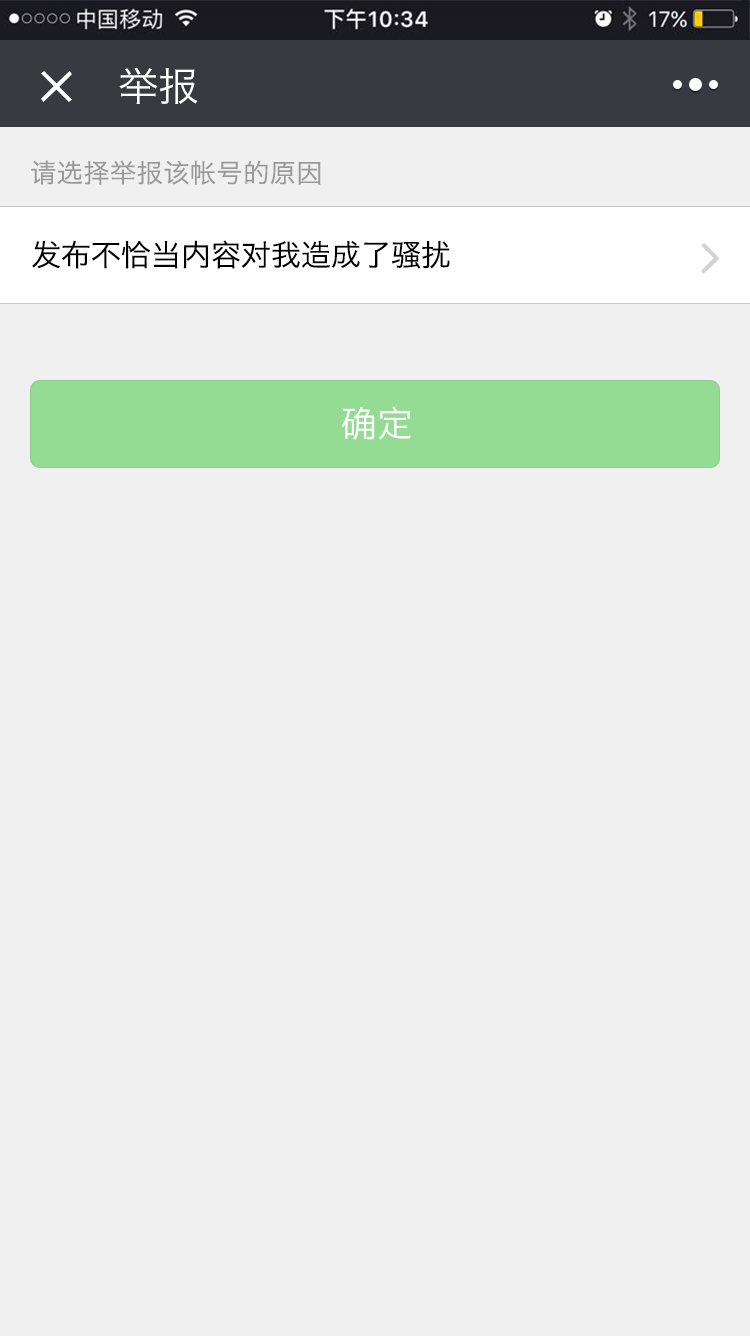
<style>
.page{position:relative;width:750px;height:1336px;background:#f0f0f0}
.page>*{position:absolute;margin:0}
.t1{font:40px "HiraginoSansGB-W3";color:#ffffff}
.t2{font:26px "HiraginoSansGB-W3";letter-spacing:0.025em;color:#999999}
.t3{font:30px "HiraginoSansGB-W3";color:#000000}
.t4{font:36px "HiraginoSansGB-W3";color:#ffffff}
</style>
<div class="page">
<p class="t1" style="left:119px;top:67px;width:79px;height:37px">举报</p>
<p class="t2" style="left:31px;top:160px;width:290px;height:25px">请选择举报该帐号的原因</p>
<p class="t3" style="left:32px;top:240px;width:418px;height:29px">发布不恰当内容对我造成了骚扰</p>
<p class="t4" style="left:341px;top:406px;width:70px;height:34px">确定</p>
</div>
